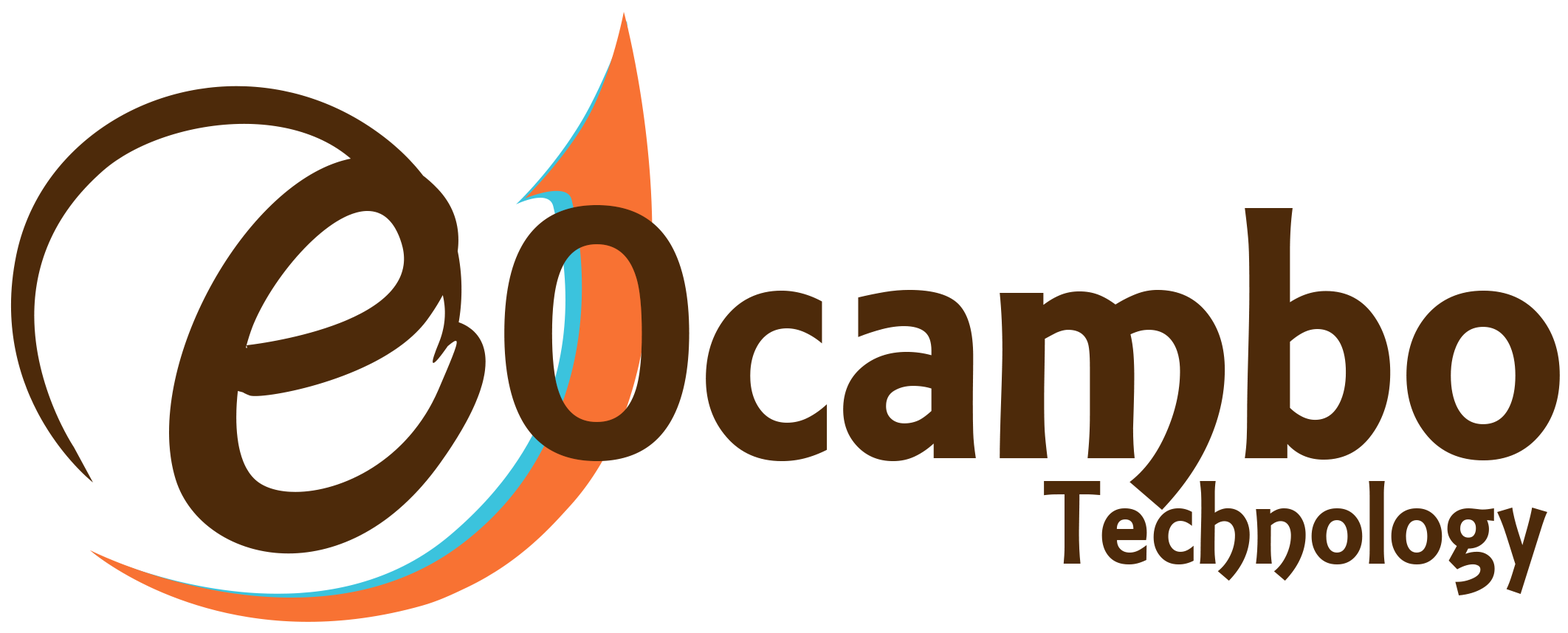
<style>
.page{position:relative;width:1568px;height:633px;background:#ffffff}
.page>*{position:absolute;margin:0}
.t1{font:384.5px "ARESSENCE";color:#4d2a0a}
.t2{font:127px "ARESSENCE";color:#4d2a0a}
</style>
<div class="page">
<p class="t1" style="left:504px;top:205px;width:1056px;height:305px">Ocambo</p>
<p class="t2" style="left:1044px;top:481px;width:503px;height:115px">Technology</p>
</div>
